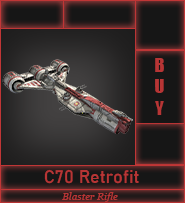
<style>
.page{position:relative;width:185px;height:203px}
.page>*{position:absolute;margin:0}
.t1{font:18px "Impact";color:#b73535}
.t2{font:18px "Bahnschrift";color:#b73535}
.t3{font:10px "Georgia-Italic";color:#b73535}
</style>
<div class="page">
<p class="t1" style="left:155px;top:58px;width:9px;height:57px;text-align:center">B<br>U<br>Y</p>
<p class="t2" style="left:44px;top:169px;width:95px;height:15px">C70 Retrofit</p>
<p class="t3" style="left:62px;top:192px;width:56px;height:10px">Blaster Rifle</p>
</div>
